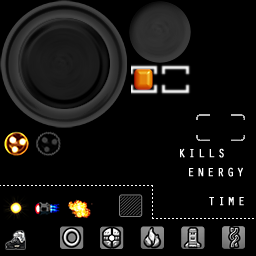
<style>
.page{position:relative;width:256px;height:256px;background:#000000}
.page>*{position:absolute;margin:0}
.t1{font:12px "OratorStd";letter-spacing:0.2em;color:#ffffff;font-weight:bold}
</style>
<div class="page">
<p class="t1" style="left:180px;top:148px;width:44px;height:10px">KILLS</p>
<p class="t1" style="left:189px;top:167px;width:54px;height:10px">ENERGY</p>
<p class="t1" style="left:209px;top:197px;width:35px;height:9px">TIME</p>
</div>
